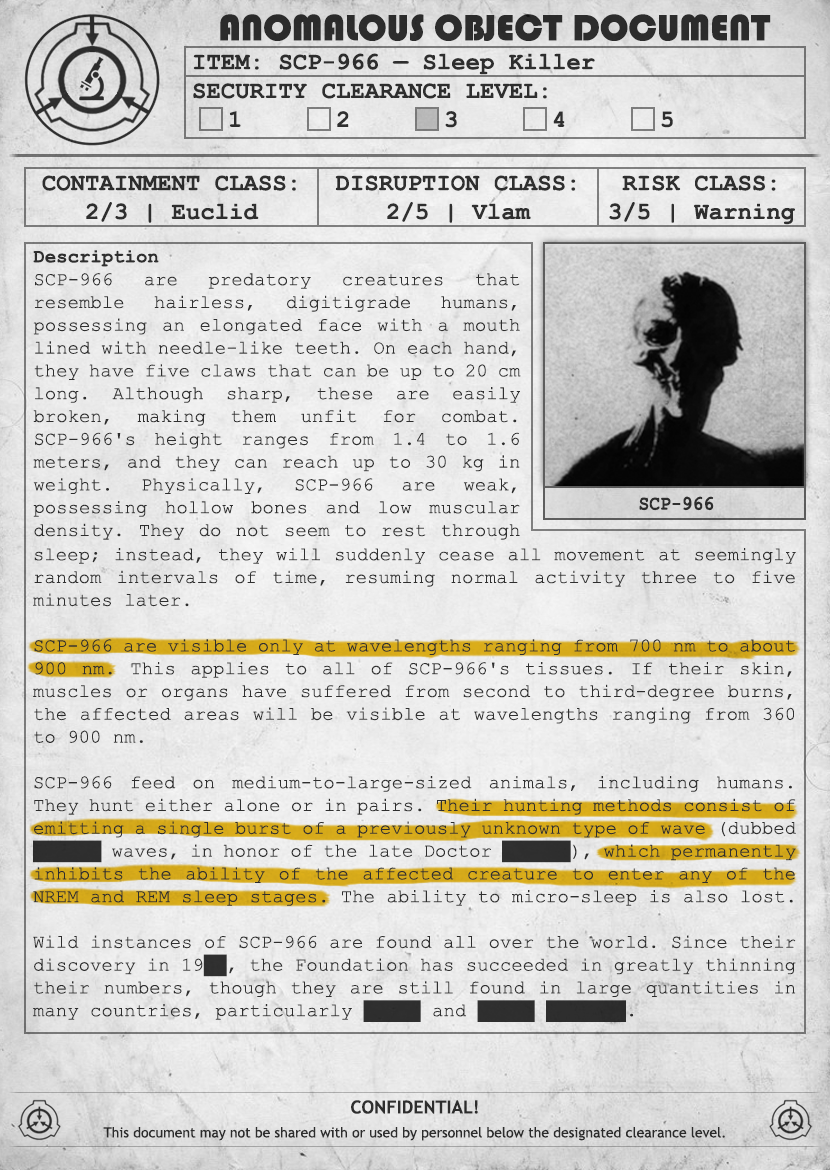
<style>
.page{position:relative;width:830px;height:1170px}
.page>*{position:absolute;margin:0}
.t1{font:38px "Bauhaus93";color:#333333;text-transform:uppercase}
.t2{font:24px "CourierNewPS-BoldMT";color:#333333}
.t3{font:24px "CourierNewPS-BoldMT";color:#333333;text-transform:uppercase}
.t4{font:19px "CourierNewPSMT";color:#333333}
.t5{font:19px "CourierNewPS-BoldMT";color:#333333}
.t6{font:20.1px "CourierNewPS-BoldMT";color:#333333;scale:0.9 1}
.t7{font:14px/24px "TrebuchetMS";color:#333333}
.t8{font:18px/24px "TrebuchetMS-Bold";color:#333333}
</style>
<div class="page">
<p class="t1" style="left:220px;top:14px;width:551px;height:27px">anomalous object document</p>
<p class="t2" style="left:193px;top:53px;width:480px;height:75px">ITEM: SCP-966 — Sleep Killer<br><span class="t3">Security CLEARANCE LEVEL:</span> <br> 1   2   3   4   5</p>
<p class="t2" style="left:42px;top:175px;width:254px;height:48px;text-align:center">CONTAINMENT CLASS:<br>2/3 | Euclid</p>
<p class="t2" style="left:335px;top:175px;width:241px;height:48px;text-align:center">DISRUPTION CLASS:<br>2/5 | Vlam</p>
<p class="t2" style="left:609px;top:175px;width:186px;height:50px;text-align:center">RISK CLASS:<br>3/5 | Warning</p>
<p class="t4" style="left:33px;top:250px;width:488px;height:290px;text-align:justify"><span class="t5">Description<br></span>SCP-966 are predatory creatures that resemble hairless, digitigrade humans, possessing an elongated face with a mouth lined with needle-like teeth. On each hand, they have five claws that can be up to 20 cm long. Although sharp, these are easily broken, making them unfit for combat. SCP-966's height ranges from 1.4 to 1.6 meters, and they can reach up to 30 kg in weight. Physically, SCP-966 are weak, possessing hollow bones and low muscular density. They do not seem to rest through sleep; instead, they will suddenly cease all movement at seemingly random intervals of time, resuming normal activity three to five minutes later.</p>
<p class="t6" style="left:639px;top:496px;width:75px;height:15px">SCP-966</p>
<p class="t4" style="left:33px;top:548px;width:763px;height:474px;text-align:justify">sleep; instead, they will suddenly cease all movement at seemingly random intervals of time, resuming normal activity three to five minutes later.<br><br>SCP-966 are visible only at wavelengths ranging from 700 nm to about 900 nm. This applies to all of SCP-966's tissues. If their skin, muscles or organs have suffered from second to third-degree burns, the affected areas will be visible at wavelengths ranging from 360 to 900 nm.<br><br>SCP-966 feed on medium-to-large-sized animals, including humans. They hunt either alone or in pairs. Their hunting methods consist of emitting a single burst of a previously unknown type of wave (dubbed ██████ waves, in honor of the late Doctor ██████), which permanently inhibits the ability of the affected creature to enter any of the NREM and REM sleep stages. The ability to micro-sleep is also lost. <br><br>Wild instances of SCP-966 are found all over the world. Since their discovery in 19██, the Foundation has succeeded in greatly thinning their numbers, though they are still found in large quantities in many countries, particularly █████ and █████ ███████.</p>
<p class="t7" style="left:103px;top:1100px;width:622px;height:41px;text-align:center"><span class="t8">CONFIDENTIAL!<br></span>This document may not be shared with or used by personnel below the designated clearance level.</p>
</div>
